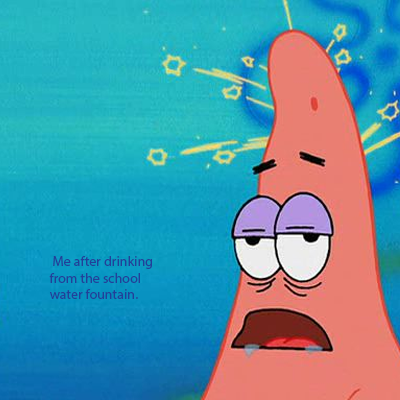
<style>
.page{position:relative;width:400px;height:400px}
.page>*{position:absolute;margin:0}
.t1{font:14px "MyriadPro-Regular";color:#21409a}
</style>
<div class="page">
<p class="t1" style="left:49px;top:256px;width:103px;height:43px">Me after drinking from the school water fountain.</p>
</div>
